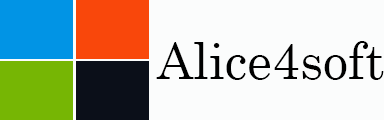
<style>
.page{position:relative;width:384px;height:120px;background:#fbfcfc}
.page>*{position:absolute;margin:0}
.t1{font:49.7px "CenturySchoolbook";color:#000000}
</style>
<div class="page">
<p class="t1" style="left:156px;top:41px;width:228px;height:39px">Alice4soft</p>
</div>
